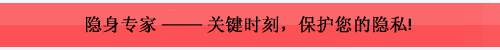
<style>
.page{position:relative;width:500px;height:50px;background:#fc5255}
.page>*{position:absolute;margin:0}
.t1{font:18px "System";color:#000000}
</style>
<div class="page">
<p class="t1" style="left:86px;top:16px;width:325px;height:17px">隐身专家 --------- 关键时刻，保护您的隐私!</p>
</div>
